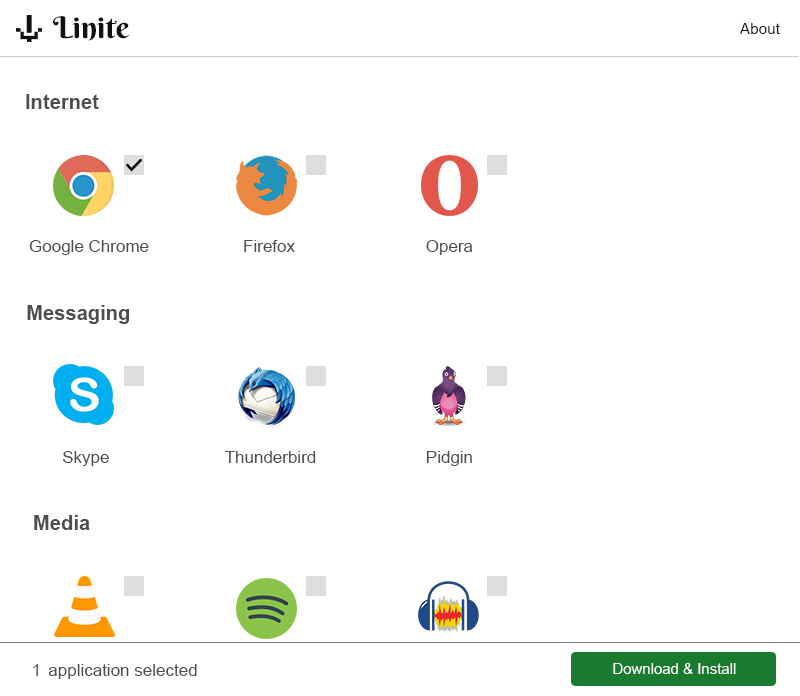
<style>
.page{position:relative;width:800px;height:696px;background:#ffffff}
.page>*{position:absolute;margin:0}
.t1{font:30px "BerkshireSwash-Regular";color:#111111}
.t2{font:15px "ArialMT";color:#111111}
.t3{font:20px "Arial-BoldMT";color:#4e4e4e}
.t4{font:17px "ArialMT";color:#4e4e4e}
.t5{font:14.8px "ArialMT";color:#ffffff}
</style>
<div class="page">
<p class="t1" style="left:53px;top:16px;width:77px;height:25px">Linite</p>
<p class="t2" style="left:740px;top:23px;width:40px;height:11px">About</p>
<p class="t3" style="left:26px;top:94px;width:73px;height:15px">Internet</p>
<p class="t4" style="left:29px;top:240px;width:120px;height:15px">Google Chrome</p>
<p class="t4" style="left:244px;top:240px;width:51px;height:12px">Firefox</p>
<p class="t4" style="left:426px;top:240px;width:47px;height:15px">Opera</p>
<p class="t3" style="left:27px;top:305px;width:102px;height:19px">Messaging</p>
<p class="t4" style="left:63px;top:451px;width:46px;height:15px">Skype</p>
<p class="t4" style="left:225px;top:451px;width:91px;height:12px">Thunderbird</p>
<p class="t4" style="left:426px;top:451px;width:46px;height:15px">Pidgin</p>
<p class="t3" style="left:34px;top:515px;width:56px;height:15px">Media</p>
<p class="t4" style="left:33px;top:664px;width:5px;height:12px">1</p>
<p class="t4" style="left:48px;top:664px;width:149px;height:15px">application selected</p>
<p class="t5" style="left:613px;top:663px;width:123px;height:11px">Download &amp; Install</p>
</div>
